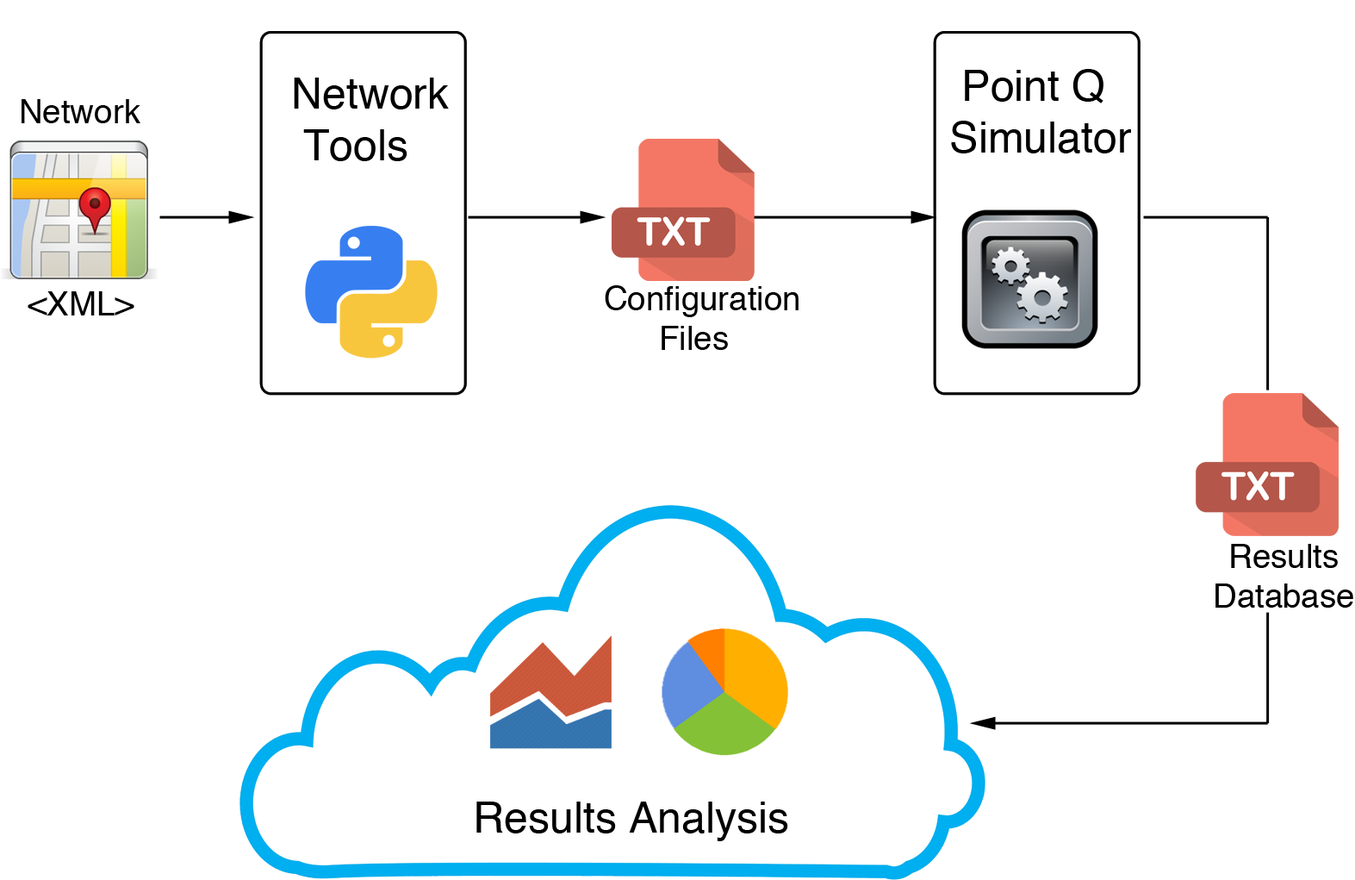
<style>
.page{position:relative;width:1355px;height:880px;background:#ffffff}
.page>*{position:absolute;margin:0}
.t1{font:43.1px "Helvetica";color:#000000}
.t2{font:33.2px "Helvetica";color:#000000}
</style>
<div class="page">
<p class="t1" style="left:294px;top:78px;width:155px;height:83px">Network<br> Tools</p>
<p class="t1" style="left:951px;top:69px;width:180px;height:84px">Point Q<br>Simulator</p>
<p class="t2" style="left:22px;top:99px;width:118px;height:24px">Network</p>
<p class="t2" style="left:28px;top:291px;width:106px;height:24px">&lt;XML&gt;</p>
<p class="t2" style="left:605px;top:285px;width:194px;height:65px">Configuration<br>      Files</p>
<p class="t2" style="left:1216px;top:544px;width:138px;height:63px;text-align:center">Results<br>Database</p>
<p class="t1" style="left:477px;top:801px;width:311px;height:40px">Results Analysis</p>
</div>
